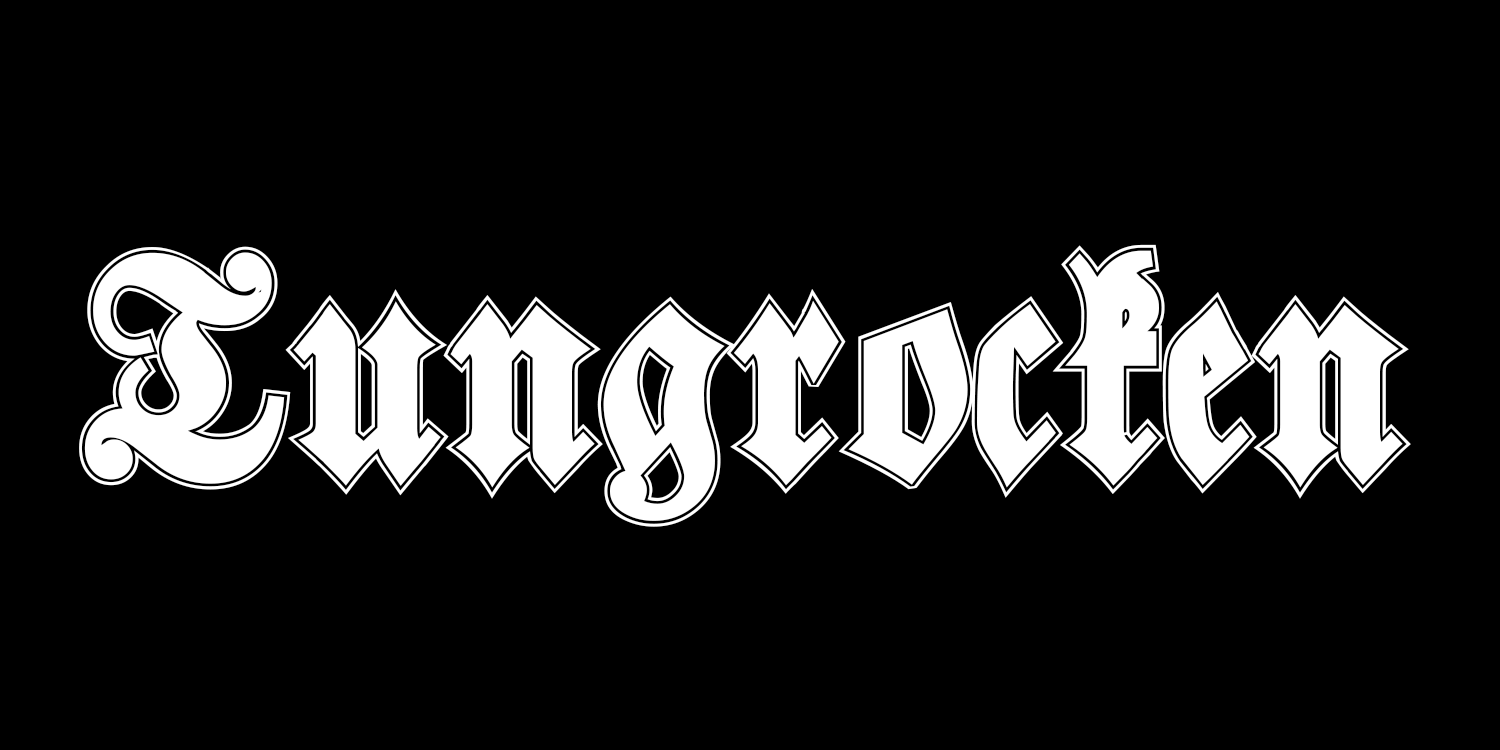
<style>
.page{position:relative;width:1500px;height:750px;background:#000000}
.page>*{position:absolute;margin:0}
.t1{font:303.7px "Walbaum-Fraktur-Inline-Bold";color:#ffffff}
</style>
<div class="page">
<p class="t1" style="left:79px;top:244px;width:1332px;height:283px">Tungrocken</p>
</div>
